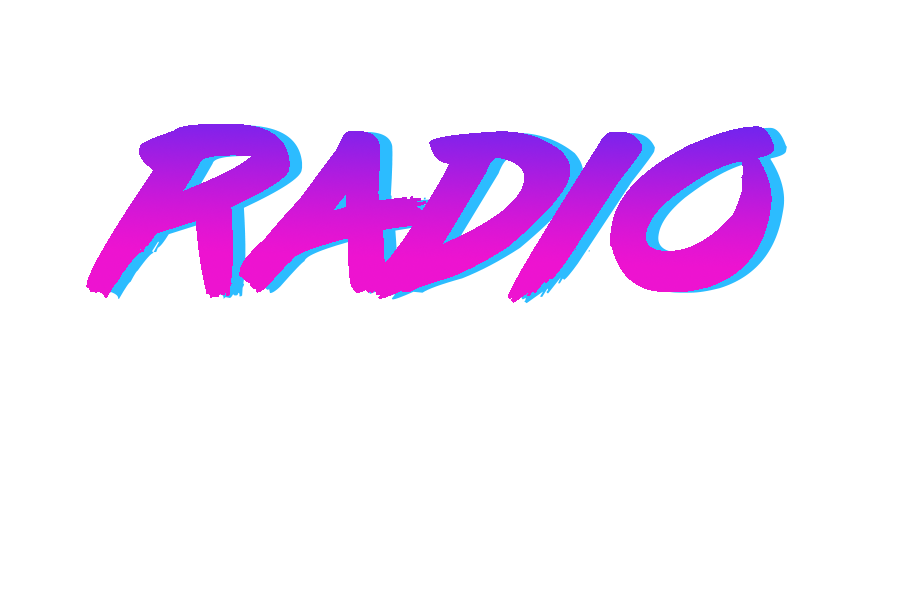
<style>
.page{position:relative;width:900px;height:600px;background:#ffffff}
.page>*{position:absolute;margin:0}
.t1{font:200px "lazer84";font-style:italic}
</style>
<div class="page">
<p class="t1" style="left:99px;top:125px;width:688px;height:179px">RADIO</p>
</div>
